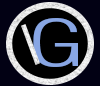
<style>
.page{position:relative;width:100px;height:86px;background:#000000}
.page>*{position:absolute;margin:0}
.t1{font:62.1px "HelveticaLTStd-LightCond";letter-spacing:0.1em;color:#88a6e4;scale:1.64 1}
</style>
<div class="page">
<p class="t1" style="left:33px;top:18px;width:45px;height:49px">G</p>
</div>
